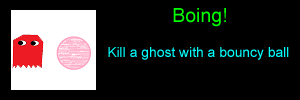
<style>
.page{position:relative;width:300px;height:100px;background:#000000}
.page>*{position:absolute;margin:0}
.t1{font:19.4px "ArialMT";color:#00ff00}
.t2{font:13.9px "ArialMT";color:#00ffff}
</style>
<div class="page">
<p class="t1" style="left:173px;top:8px;width:53px;height:19px">Boing!</p>
<p class="t2" style="left:108px;top:47px;width:181px;height:13px">Kill a ghost with a bouncy ball</p>
</div>
